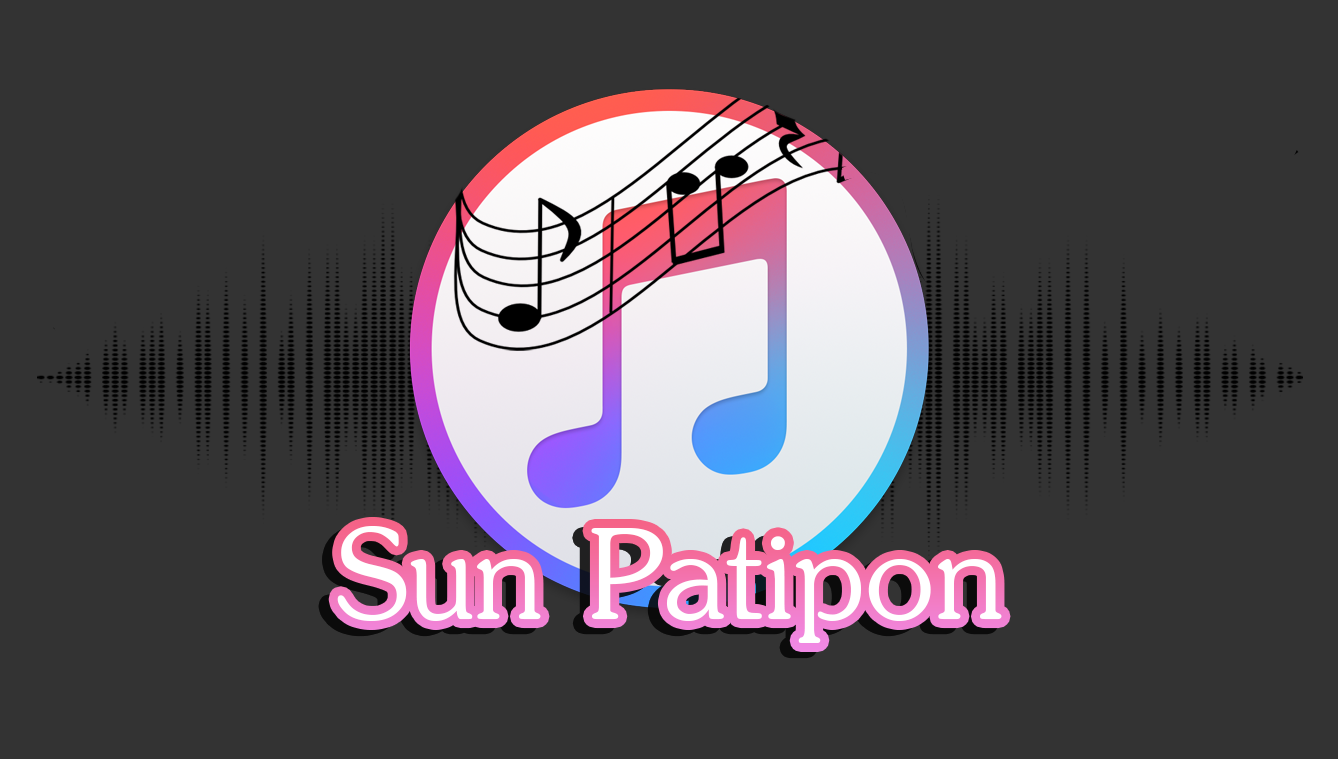
<style>
.page{position:relative;width:1338px;height:759px;background:#333333}
.page>*{position:absolute;margin:0}
.t1{font:200px "JasmineUPC";color:#ffffff}
</style>
<div class="page">
<p class="t1" style="left:337px;top:526px;width:665px;height:117px">Sun Patipon</p>
</div>
